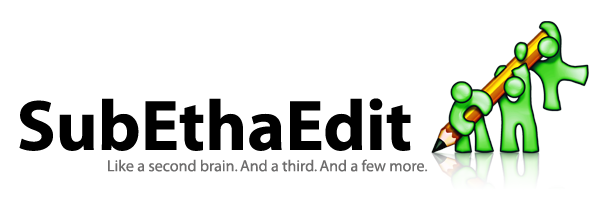
<style>
.page{position:relative;width:608px;height:202px;background:#ffffff}
.page>*{position:absolute;margin:0}
.t1{font:72px "Myriad-Bold";color:#000000}
.t2{font:16px "Myriad-Roman";color:#6e6d6d}
</style>
<div class="page">
<p class="t1" style="left:19px;top:98px;width:392px;height:53px">SubEthaEdit</p>
<p class="t2" style="left:108px;top:159px;width:320px;height:13px">Like a second brain. And a third. And a few more.</p>
</div>
